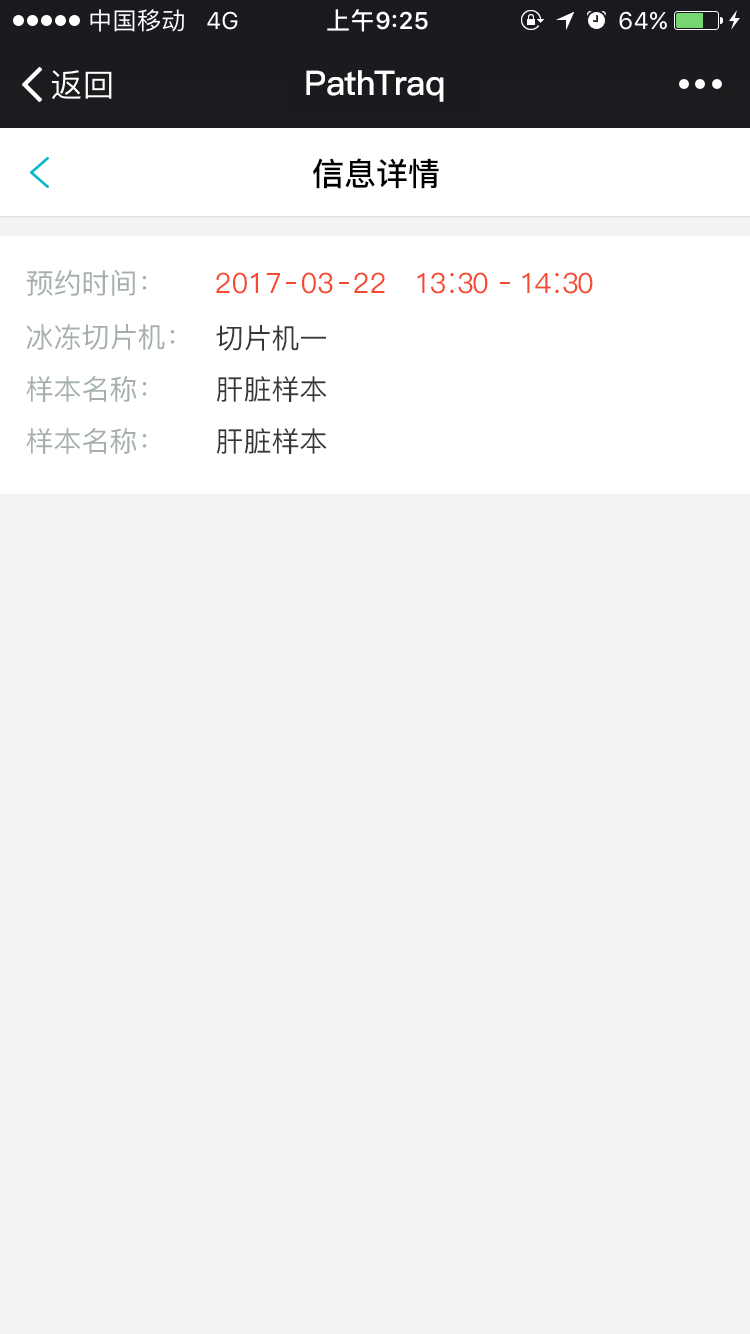
<style>
.page{position:relative;width:750px;height:1334px;background:#f3f3f3}
.page>*{position:absolute;margin:0}
.t1{font:24px "PingFang-SC-Medium";letter-spacing:0.02em;color:#ffffff}
.t2{font:34px "PingFang-SC-Bold";letter-spacing:-0.025em;color:#ffffff}
.t3{font:32px "PingFang-SC-Bold";color:#000000}
.t4{font:28px "PingFang-SC-Medium";color:#a5afb0}
.t5{font:28px "PingFang-SC-Medium";color:#f74830}
.t6{font:28px "PingFang-SC-Medium";letter-spacing:-0.06em;color:#f74830}
.t7{font:28px "PingFang-SC-Medium";color:#373737}
</style>
<div class="page">
<p class="t1" style="left:90px;top:9px;width:93px;height:23px">中国移动</p>
<p class="t2" style="left:306px;top:70px;width:138px;height:32px">PathTraq</p>
<p class="t3" style="left:313px;top:158px;width:126px;height:31px">信息详情</p>
<p class="t4" style="left:26px;top:270px;width:121px;height:26px">预约时间：</p>
<p class="t5" style="left:216px;top:272px;width:169px;height:22px">2017  03  22</p>
<p class="t6" style="left:417px;top:272px;width:71px;height:22px">13∶30</p>
<p class="t6" style="left:522px;top:272px;width:71px;height:22px">14∶30</p>
<p class="t4" style="left:26px;top:324px;width:149px;height:26px">冰冻切片机：</p>
<p class="t7" style="left:216px;top:325px;width:110px;height:26px">切片机一</p>
<p class="t4" style="left:26px;top:376px;width:121px;height:26px">样本名称：</p>
<p class="t7" style="left:216px;top:376px;width:111px;height:26px">肝脏样本</p>
<p class="t4" style="left:26px;top:428px;width:121px;height:26px">样本名称：</p>
<p class="t7" style="left:216px;top:428px;width:111px;height:26px">肝脏样本</p>
</div>
